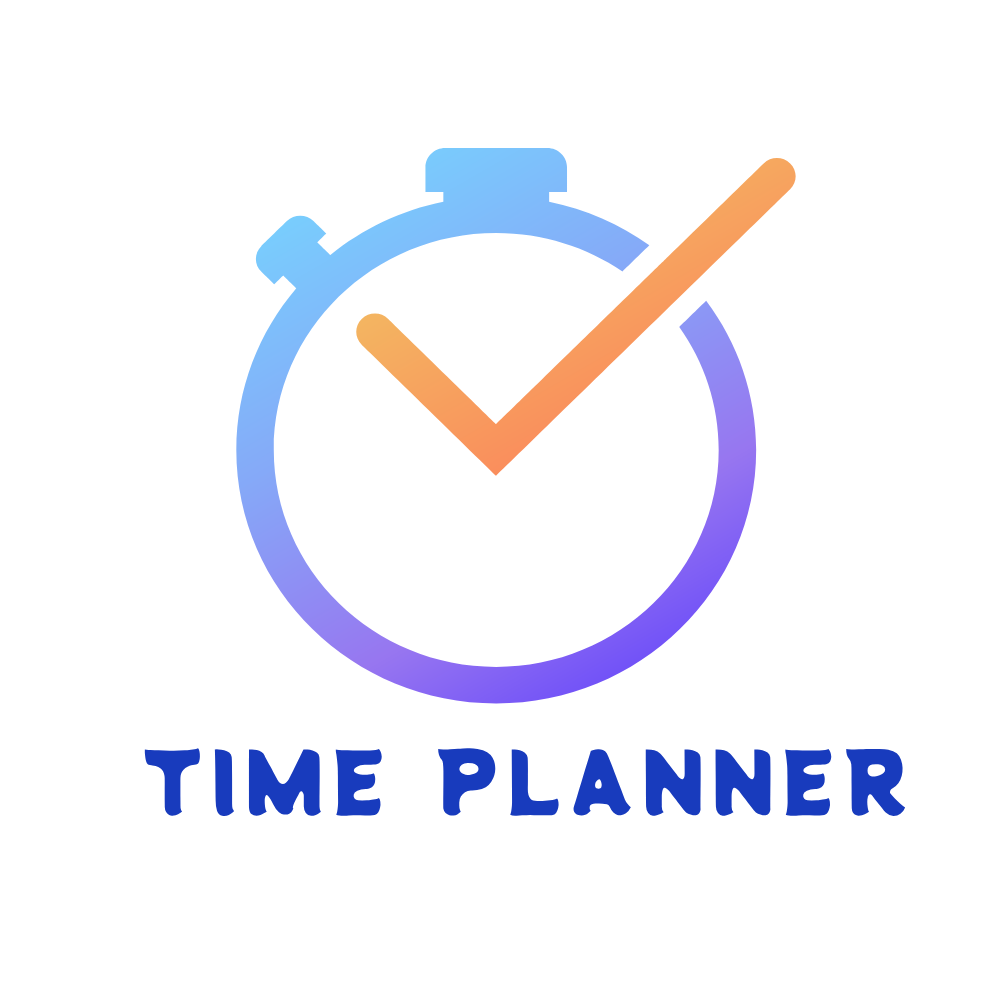
<style>
.page{position:relative;width:1000px;height:1000px;background:#ffffff}
.page>*{position:absolute;margin:0}
.t1{font:83px "PottaOne-Regular";letter-spacing:0.1em;color:#183bbd}
</style>
<div class="page">
<p class="t1" style="left:144px;top:748px;width:762px;height:69px">TIME PLANNER</p>
</div>
